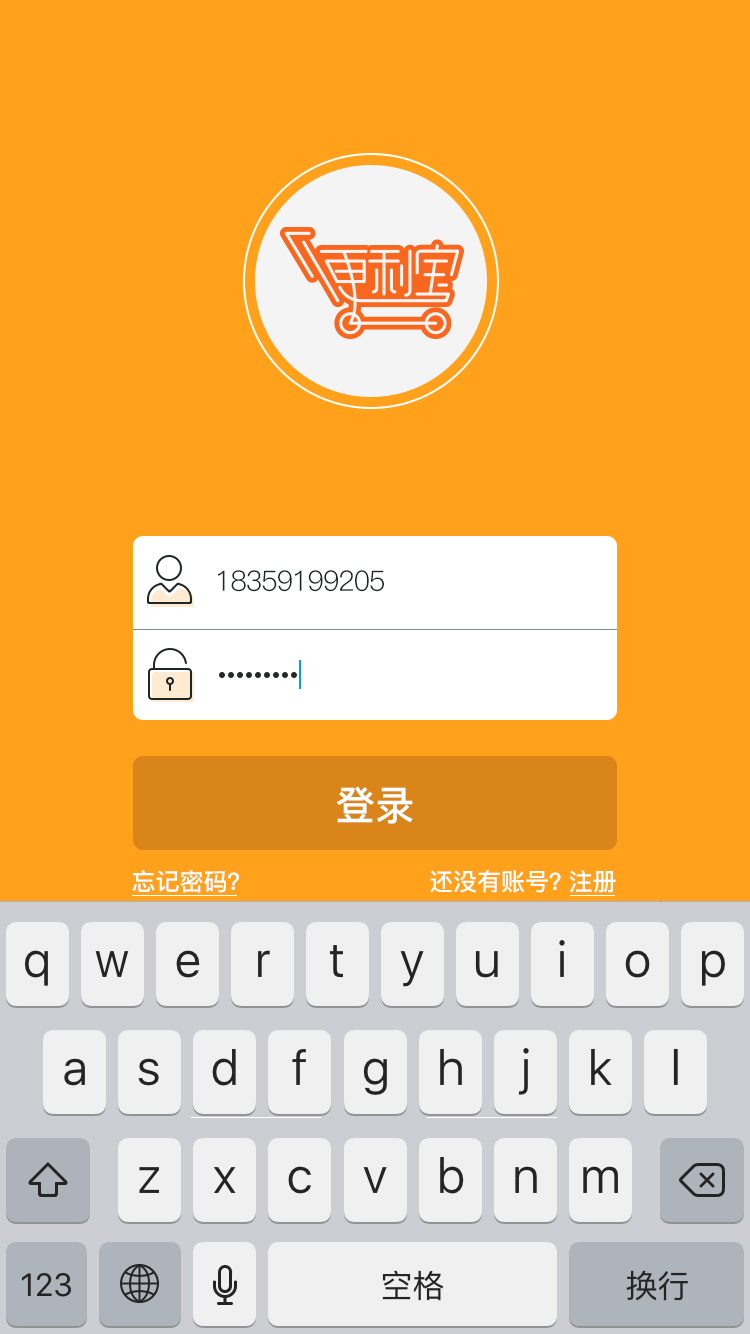
<style>
.page{position:relative;width:750px;height:1334px;background:#ffa11b}
.page>*{position:absolute;margin:0}
.t1{font:28.1px "PingFang-SC-Regular";letter-spacing:-0.05em;color:#1e2625}
.t2{font:40px "PingFang-SC-Bold";color:#ffffff}
.t3{font:24px "PingFang-SC-Bold";color:#ffffff}
.t4{font:24px "PingFang-SC-Bold";letter-spacing:-0.2em;color:#ffffff}
</style>
<div class="page">
<p class="t1" style="left:218px;top:570px;width:166px;height:22px">18359199205</p>
<p class="t2" style="left:336px;top:786px;width:77px;height:38px">登录</p>
<p class="t3" style="left:132px;top:870px;width:107px;height:23px">忘记密码？</p>
<p class="t3" style="left:430px;top:870px;width:186px;height:23px">还没有账号<span class="t4">？</span>注册</p>
</div>
